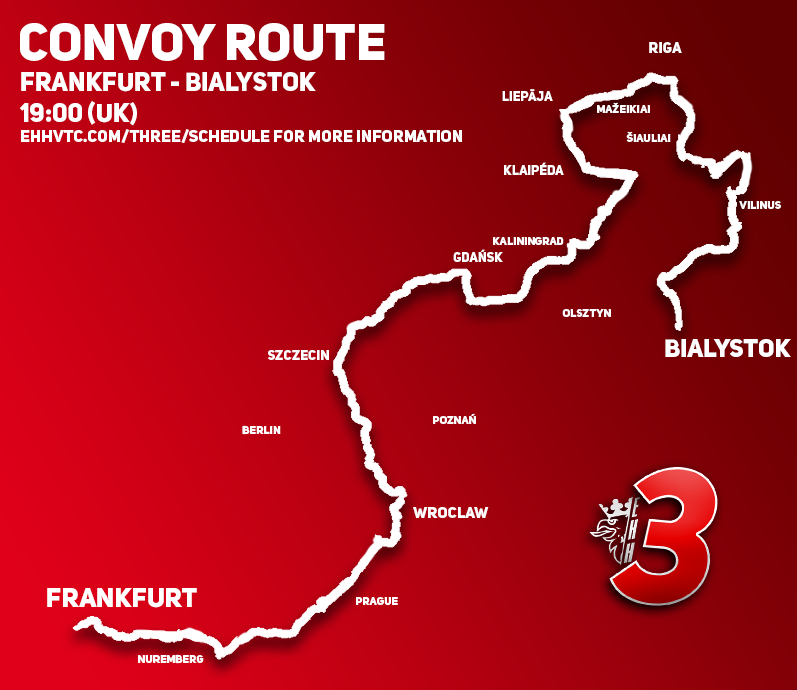
<style>
.page{position:relative;width:797px;height:690px}
.page>*{position:absolute;margin:0}
.t1{font:51.5px "UniSansHeavyCAPS";color:#ffffff}
.t2{font:14.9px "UniSansHeavyCAPS";color:#ffffff}
.t3{font:16.8px "UniSansHeavyCAPS";color:#ffffff}
.t4{font:25.8px "UniSansHeavyCAPS";color:#ffffff}
.t5{font:13.1px "UniSansHeavyCAPS";color:#ffffff}
.t6{font:11.3px "UniSansHeavyCAPS";color:#ffffff}
.t7{font:24.9px "UniSansHeavyCAPS";color:#ffffff}
.t8{font:13.8px "UniSansHeavyCAPS";color:#ffffff}
.t9{font:15.6px "UniSansHeavyCAPS";color:#ffffff}
.t10{font:26.7px "UniSansHeavyCAPS";color:#ffffff}
</style>
<div class="page">
<p class="t1" style="left:20px;top:23px;width:365px;height:38px">convoy route</p>
<p class="t2" style="left:649px;top:42px;width:33px;height:11px">riga</p>
<p class="t3" style="left:20px;top:72px;width:442px;height:71px"><span class="t4">frankfurt - bialystok<br>19:00 (uk)<br></span>ehhvtc.com/three/schedule for more information</p>
<p class="t5" style="left:502px;top:89px;width:51px;height:12px">Liepāja</p>
<p class="t6" style="left:597px;top:102px;width:53px;height:11px">Mažeikiai</p>
<p class="t6" style="left:626px;top:131px;width:45px;height:11px">Šiauliai</p>
<p class="t5" style="left:504px;top:162px;width:60px;height:13px">klaipéda</p>
<p class="t6" style="left:739px;top:201px;width:42px;height:8px">VILINUS</p>
<p class="t6" style="left:493px;top:237px;width:71px;height:8px">KALININGRAD</p>
<p class="t5" style="left:453px;top:249px;width:50px;height:13px">Gdańsk</p>
<p class="t6" style="left:562px;top:309px;width:49px;height:8px">OLSZTYN</p>
<p class="t7" style="left:665px;top:339px;width:126px;height:18px">bialystok</p>
<p class="t8" style="left:268px;top:350px;width:61px;height:10px">Szczecin</p>
<p class="t6" style="left:433px;top:413px;width:43px;height:11px">Poznań</p>
<p class="t6" style="left:242px;top:425px;width:39px;height:10px">BERLIN</p>
<p class="t9" style="left:413px;top:507px;width:76px;height:11px">wroclaw</p>
<p class="t10" style="left:47px;top:588px;width:150px;height:20px">frankfurt</p>
<p class="t6" style="left:356px;top:597px;width:42px;height:9px">PRAGUE</p>
<p class="t6" style="left:138px;top:654px;width:66px;height:10px">NUREMBERG</p>
</div>
